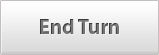
<style>
.page{position:relative;width:159px;height:55px}
.page>*{position:absolute;margin:0}
.t1{font:21.2px "MyriadPro-Bold"}
</style>
<div class="page">
<p class="t1" style="left:40px;top:19px;width:79px;height:15px">End Turn</p>
</div>
